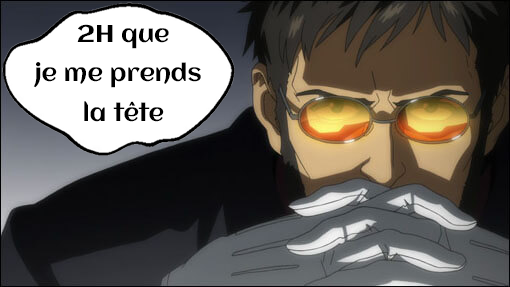
<style>
.page{position:relative;width:510px;height:287px}
.page>*{position:absolute;margin:0}
.t1{font:24px "Aclonica-Regular";color:#000000}
</style>
<div class="page">
<p class="t1" style="left:77px;top:24px;width:92px;height:25px">2H que</p>
<p class="t1" style="left:33px;top:62px;width:168px;height:26px">je me prends</p>
<p class="t1" style="left:84px;top:101px;width:80px;height:21px">la tête</p>
</div>
